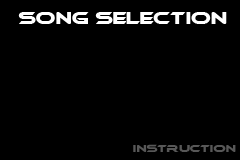
<style>
.page{position:relative;width:240px;height:160px;background:#000000}
.page>*{position:absolute;margin:0}
.t1{font:16px "Ethnocentric";color:#ffffff;text-transform:uppercase;scale:1.07 1}
.t2{font:10px "Ethnocentric";color:#575757;text-transform:uppercase;scale:1.07 1}
</style>
<div class="page">
<p class="t1" style="left:18px;top:12px;width:209px;height:12px">SONG SELECTION</p>
<p class="t2" style="left:133px;top:144px;width:103px;height:8px">Instruction</p>
</div>
